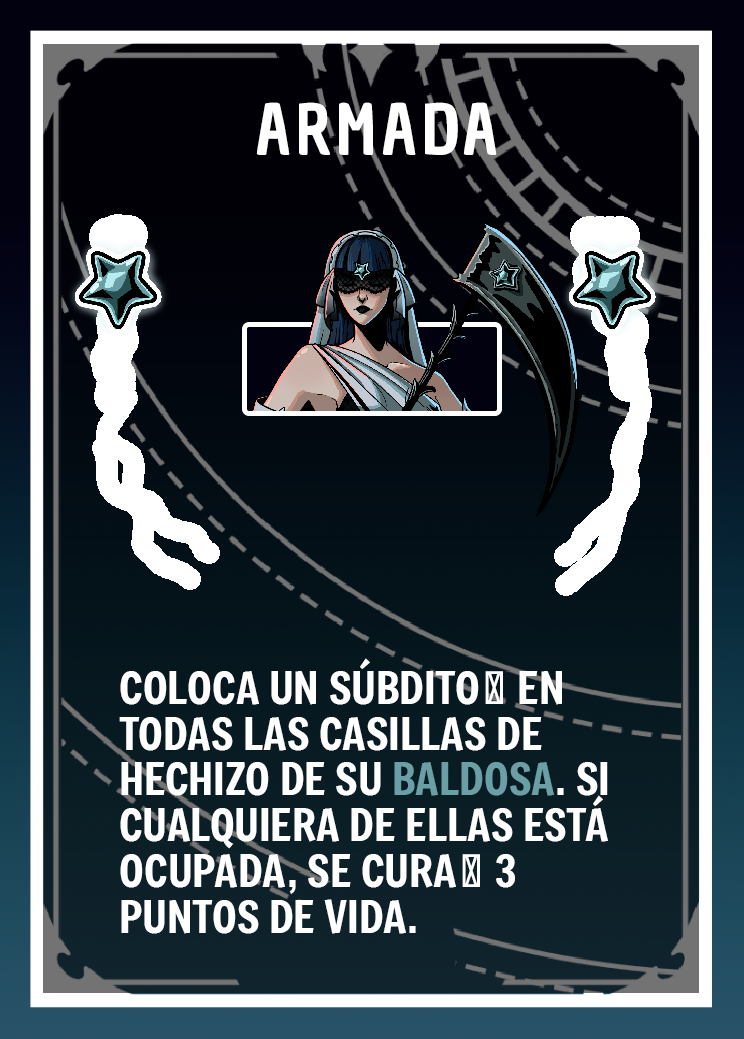
<style>
.page{position:relative;width:744px;height:1039px}
.page>*{position:absolute;margin:0}
.t1{font:66.7px "ChauPhilomeneOne-Regular";letter-spacing:0.075em;color:#ffffff}
.t2{font:43.7px/45.8px "Freeman-Regular";color:#ffffff}
.t3{font:43.7px/45.8px "Freeman-Regular";color:#6aa0a5}
</style>
<div class="page">
<p class="t1" style="left:256px;top:102px;width:241px;height:53px">ARMADA</p>
<p class="t2" style="left:119px;top:658px;width:489px;height:276px">COLOCA UN SÚBDITO👾 EN TODAS LAS CASILLAS DE HECHIZO DE SU <span class="t3">BALDOSA</span>. SI CUALQUIERA DE ELLAS ESTÁ OCUPADA, SE CURA🩸 3 PUNTOS DE VIDA.</p>
</div>
